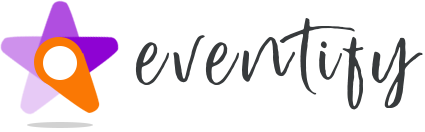
<style>
.page{position:relative;width:425px;height:132px;background:#ffffff}
.page>*{position:absolute;margin:0}
.t1{font:165px "VayenthaScriptDemo";letter-spacing:0.05em;color:#373a3c}
</style>
<div class="page">
<p class="t1" style="left:135px;top:18px;width:288px;height:92px">eventify</p>
</div>
